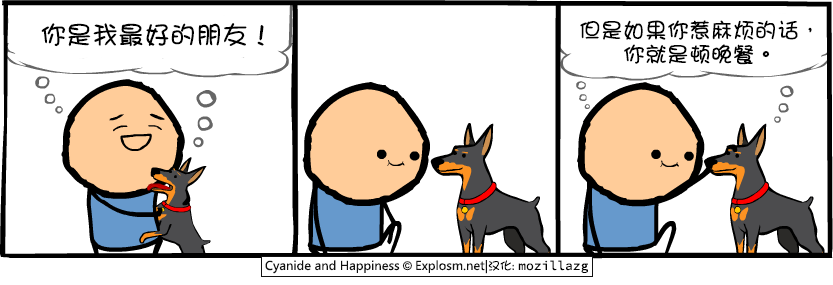
<style>
.page{position:relative;width:833px;height:285px;background:#ffffff}
.page>*{position:absolute;margin:0}
.t1{font:26px "DFGirl";color:#000000}
.t2{font:22px/24px "DFGirl";color:#000000}
</style>
<div class="page">
<p class="t1" style="left:41px;top:23px;width:223px;height:24px">你是我最好的朋友！</p>
<p class="t2" style="left:580px;top:20px;width:232px;height:45px">但是如果你惹麻烦的话，<br>      你就是顿晚餐。</p>
</div>
